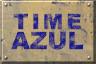
<style>
.page{position:relative;width:96px;height:64px}
.page>*{position:absolute;margin:0}
.t1{font:21.3px/20px "Arial-Black";letter-spacing:0.145em;text-transform:uppercase}
.t2{font:24px/20px "Arial-Black";letter-spacing:0.005em;text-transform:uppercase}
</style>
<div class="page">
<p class="t1" style="left:11px;top:13px;width:72px;height:37px;text-align:center">TIME<br><span class="t2">AZUL</span></p>
</div>
